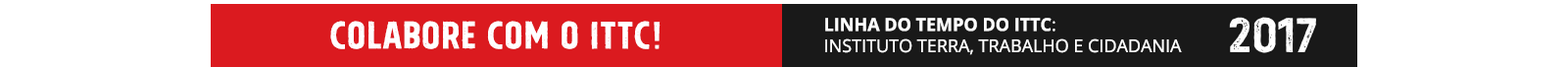
<style>
.page{position:relative;width:1568px;height:67px;background:#ffffff}
.page>*{position:absolute;margin:0}
.t1{font:17.6px "OpenSans";color:#ffffff;text-transform:uppercase}
.t2{font:17.6px "OpenSans-Bold";color:#ffffff;text-transform:uppercase}
.t3{font:47px "TolyerX-VintageNo1";color:#ffffff;text-transform:uppercase}
</style>
<div class="page">
<p class="t1" style="left:825px;top:18px;width:357px;height:37px"><span class="t2">linha do tempo do ittc</span>:<br>instituto terra, trabalho e cidadania</p>
<p class="t3" style="left:330px;top:21px;width:331px;height:28px">COLABORE COM O ITTC!</p>
</div>
